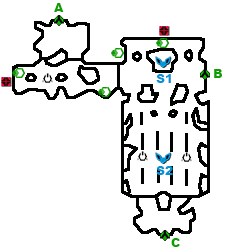
<style>
.page{position:relative;width:244px;height:250px;background:#ffffff}
.page>*{position:absolute;margin:0}
.t1{font:12px "Arial-Black";color:#0d9e01}
.t2{font:12px "Arial-Black";color:#0692d2}
</style>
<div class="page">
<p class="t1" style="left:54px;top:3px;width:10px;height:9px">A</p>
<p class="t2" style="left:156px;top:74px;width:15px;height:9px">S1</p>
<p class="t1" style="left:214px;top:69px;width:8px;height:9px">B</p>
<p class="t2" style="left:156px;top:166px;width:17px;height:9px">S2</p>
<p class="t1" style="left:171px;top:238px;width:9px;height:9px">C</p>
</div>
